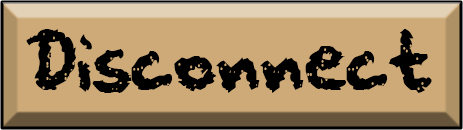
<style>
.page{position:relative;width:463px;height:130px;background:#cdaa77}
.page>*{position:absolute;margin:0}
.t1{font:65px "squeakychalksound";color:#000000}
</style>
<div class="page">
<p class="t1" style="left:26px;top:29px;width:406px;height:64px">Disconnect</p>
</div>
